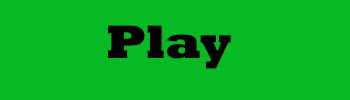
<style>
.page{position:relative;width:350px;height:100px;background:#05ba22}
.page>*{position:absolute;margin:0}
.t1{font:48.1px "Rockwell-ExtraBold";color:#000000}
</style>
<div class="page">
<p class="t1" style="left:108px;top:25px;width:123px;height:44px">Play</p>
</div>
